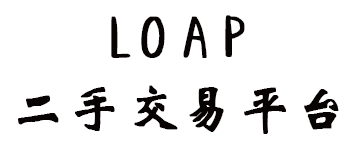
<style>
.page{position:relative;width:350px;height:150px;background:#ffffff}
.page>*{position:absolute;margin:0}
.t1{font:62.5px "ZiYuLianHuaTi";letter-spacing:0.02em;color:#070303;text-transform:uppercase;font-weight:bold}
.t2{font:54.2px "STXinwei";letter-spacing:0.02em;color:#070303;text-transform:uppercase;font-weight:bold}
</style>
<div class="page">
<p class="t1" style="left:111px;top:16px;width:20px;height:42px">L</p>
<p class="t1" style="left:141px;top:16px;width:24px;height:42px">O</p>
<p class="t1" style="left:183px;top:16px;width:24px;height:42px">A</p>
<p class="t1" style="left:225px;top:15px;width:20px;height:42px">P</p>
<p class="t2" style="left:18px;top:85px;width:321px;height:49px">二手交易平台</p>
</div>
